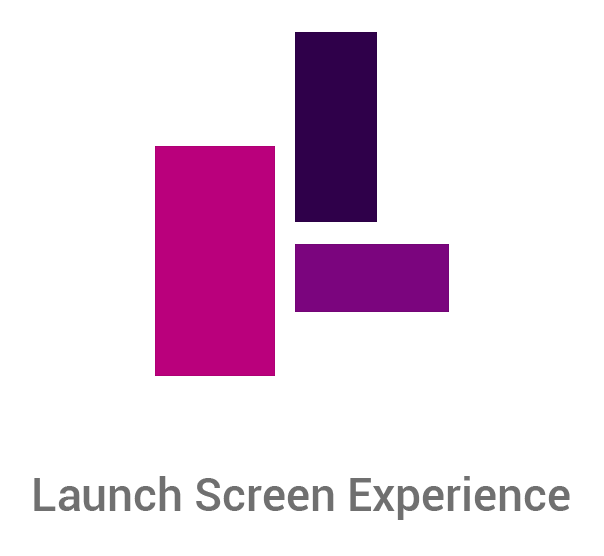
<style>
.page{position:relative;width:604px;height:556px;background:#ffffff}
.page>*{position:absolute;margin:0}
.t1{font:45.7px "Roboto-Medium";color:#707070}
</style>
<div class="page">
<p class="t1" style="left:34px;top:476px;width:536px;height:44px">Launch Screen Experience</p>
</div>
